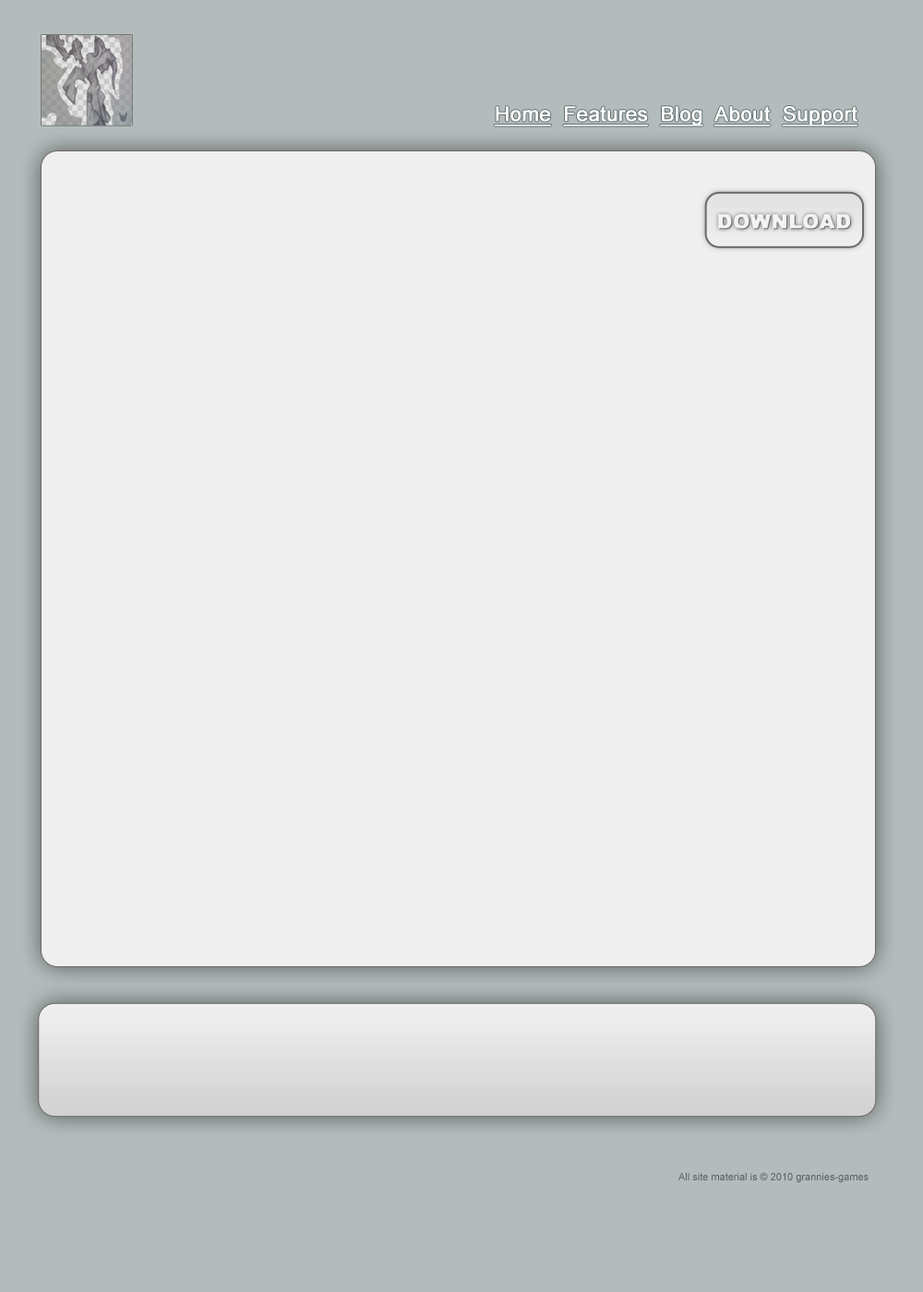
<style>
.page{position:relative;width:923px;height:1292px;background:#f0efef}
.page>*{position:absolute;margin:0}
.t1{font:20.3px "ArialMT";color:#ffffff;font-weight:bold;text-decoration:underline}
.t2{font:20.3px "Arial-Black";color:#f3f3f3;font-weight:bold}
.t3{font:10.2px "ArialMT";color:#5d6262}
</style>
<div class="page">
<p class="t1" style="left:494px;top:106px;width:363px;height:20px">Home  Features  Blog  About  Support</p>
<p class="t2" style="left:718px;top:214px;width:133px;height:16px">DOWNLOAD</p>
<p class="t3" style="left:678px;top:1173px;width:190px;height:10px">All site material is © 2010 grannies-games</p>
</div>
